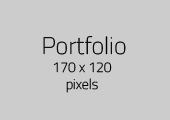
<style>
.page{position:relative;width:170px;height:120px;background:#cccccc}
.page>*{position:absolute;margin:0}
.t1{font:24px "TitilliumWeb-Thin";color:#000000}
.t2{font:14px "TitilliumWeb-Thin";color:#000000}
</style>
<div class="page">
<p class="t1" style="left:43px;top:36px;width:83px;height:19px">Portfolio</p>
<p class="t2" style="left:53px;top:62px;width:59px;height:31px;text-align:center">170 x 120<br>pixels</p>
</div>
